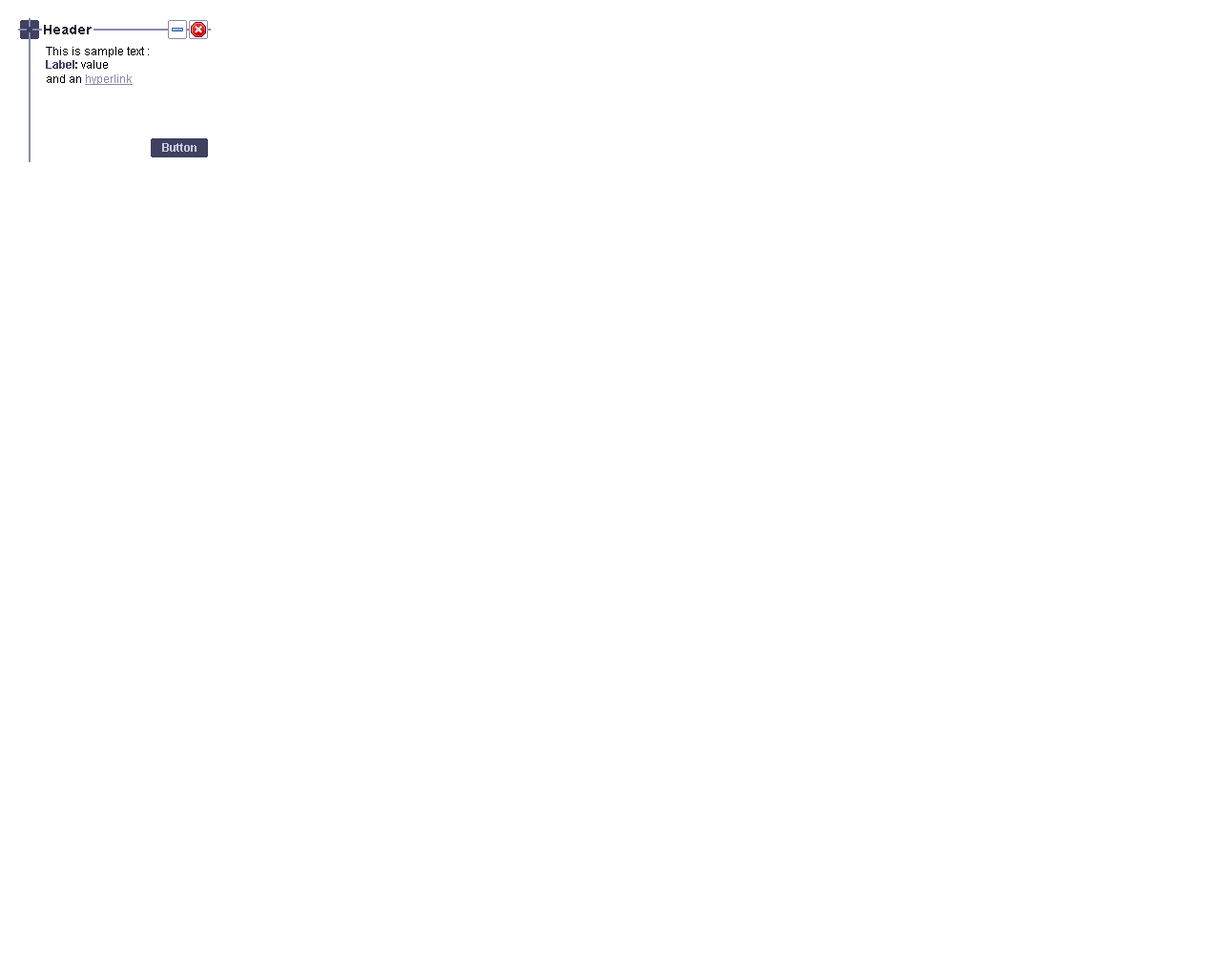
<style>
.page{position:relative;width:1221px;height:977px;background:#ffffff}
.page>*{position:absolute;margin:0}
.t1{font:13.4px "Arial-BoldMT";color:#202030}
.t2{font:11.4px "ArialMT";color:#000000}
.t3{font:11.4px "Arial-BoldMT";color:#404060}
.t4{font:11.4px "Arial-BoldMT";color:#000000}
.t5{font:11.4px "ArialMT";color:#8888b0;text-decoration:underline}
.t6{font:11.4px "Arial-BoldMT";color:#c8c8e0}
</style>
<div class="page">
<p class="t1" style="left:44px;top:25px;width:48px;height:9px">Header</p>
<p class="t2" style="left:46px;top:47px;width:103px;height:38px">This is sample text :<br><span class="t3">Label</span><span class="t4">: </span>value<br>and an <span class="t5">hyperlink</span></p>
<p class="t6" style="left:162px;top:143px;width:34px;height:9px">Button</p>
</div>
